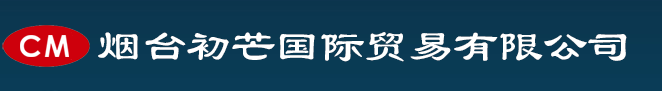
<style>
.page{position:relative;width:662px;height:91px}
.page>*{position:absolute;margin:0}
.t1{font:45px "LiSu";letter-spacing:-0.01em;color:#ffffff}
</style>
<div class="page">
<p class="t1" style="left:98px;top:32px;width:529px;height:30px">烟台初芒国际贸易有限公司</p>
</div>
